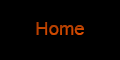
<style>
.page{position:relative;width:120px;height:60px;background:#000000}
.page>*{position:absolute;margin:0}
.t1{font:20px "Gautami";color:#c04500}
</style>
<div class="page">
<p class="t1" style="left:36px;top:22px;width:48px;height:13px">Home</p>
</div>
